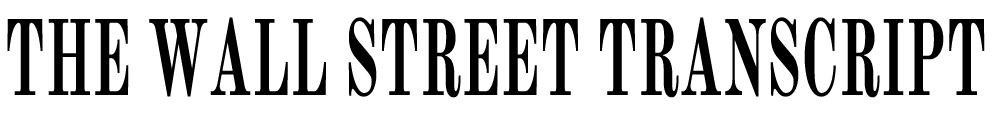
<style>
.page{position:relative;width:992px;height:122px;background:#ffffff}
.page>*{position:absolute;margin:0}
.t1{font:106.1px "OldStandard-Bold";color:#010000;scale:0.54 1}
</style>
<div class="page">
<p class="t1" style="left:7px;top:17px;width:978px;height:81px">THE WALL STREET TRANSCRIPT</p>
</div>
